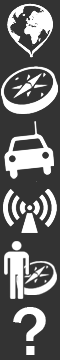
<style>
.page{position:relative;width:60px;height:360px;background:#333333}
.page>*{position:absolute;margin:0}
.t1{font:72px "FranklinGothic-Medium";letter-spacing:0.025em;color:#ffffff}
</style>
<div class="page">
<p class="t1" style="left:13px;top:307px;width:33px;height:48px">?</p>
</div>
